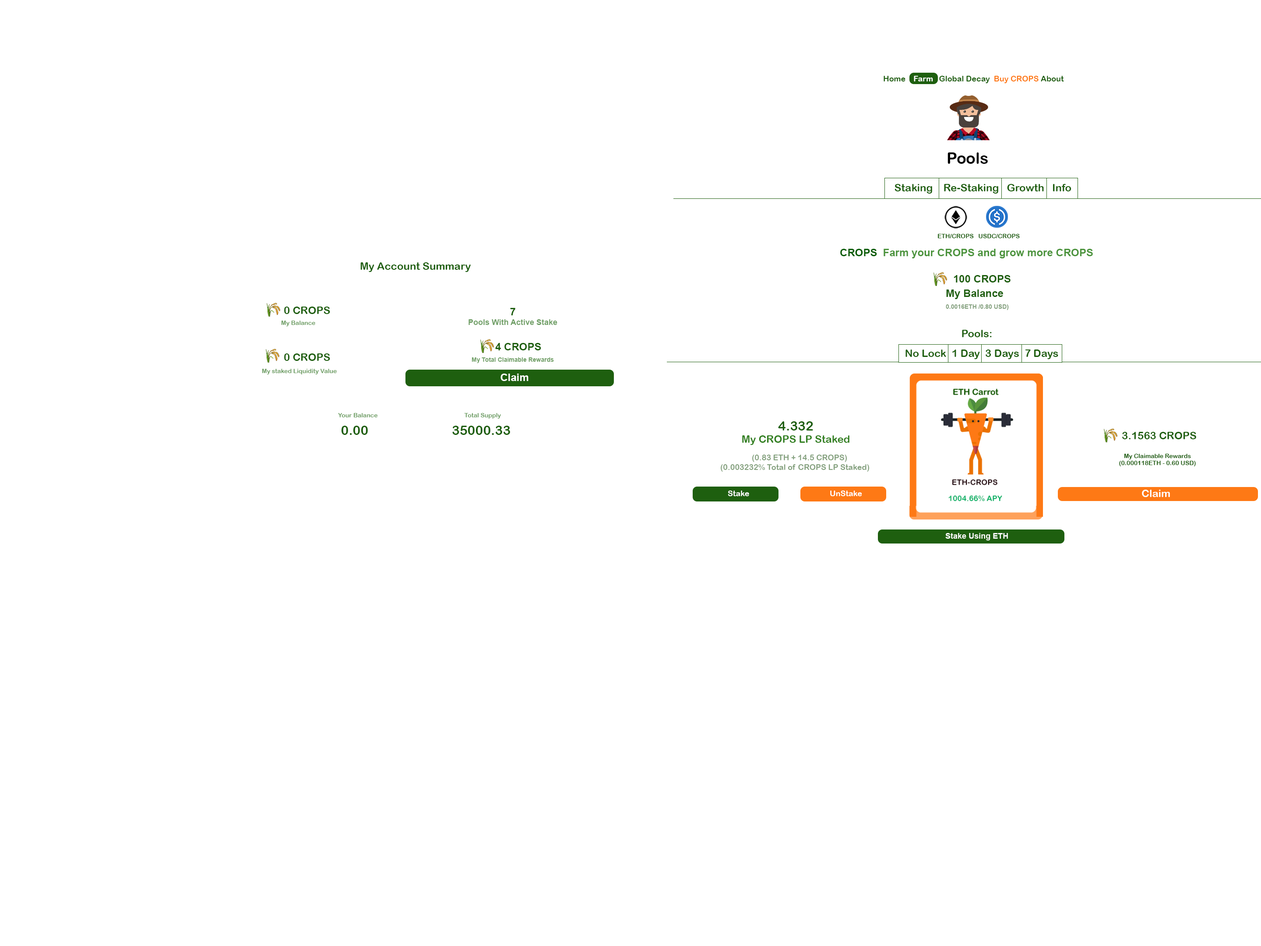
<style>
.page{position:relative;width:1261px;height:946px;background:#ffffff}
.page>*{position:absolute;margin:0}
.t1{font:7.9px "ArialRoundedMTBold";color:#1e5f0f}
.t2{font:7.9px "ArialRoundedMTBold";color:#ffffff}
.t3{font:7.9px "ArialRoundedMTBold";color:#fe7915}
.t4{font:15.8px "ArialRoundedMTBold";color:#000000}
.t5{font:10.5px "ArialRoundedMTBold";color:#1e5f0f}
.t6{font:6.1px "ArialRoundedMTBold";color:#1e5f0f}
.t7{font:10.5px "Arial-BoldMT";color:#4c943d}
.t8{font:10.5px "Arial-BoldMT";color:#065c00}
.t9{font:10.5px "Arial-BoldMT";color:#1e5f0f}
.t10{font:6.1px "Arial-BoldMT";color:#83a07d}
.t11{font:7.9px "Arial-BoldMT";color:#709f66}
.t12{font:6.1px "ArialRoundedMTBold";color:#709f66}
.t13{font:6.1px "Arial-BoldMT";color:#709f66}
.t14{font:10.5px "Arial-BoldMT";color:#ffffff}
.t15{font:13.1px "ArialRoundedMTBold";color:#1e5f0f}
.t16{font:10.5px "ArialRoundedMTBold";color:#328020}
.t17{font:7.9px "ArialRoundedMTBold";color:#83a07d}
.t18{font:10.5px "ArialRoundedMTBold";color:#ffffff}
.t19{font:7.9px "Arial-BoldMT";color:#ffffff}
</style>
<div class="page">
<p class="t1" style="left:884px;top:76px;width:180px;height:7px">Home   <span class="t2"> Farm  </span> Global Decay  <span class="t3">Buy CROPS</span> About</p>
<p class="t4" style="left:947px;top:152px;width:41px;height:12px">Pools</p>
<p class="t5" style="left:894px;top:184px;width:177px;height:10px">Staking    Re-Staking   Growth   Info</p>
<p class="t6" style="left:938px;top:234px;width:82px;height:4px">ETH/CROPS   USDC/CROPS</p>
<p class="t7" style="left:840px;top:249px;width:253px;height:9px"><span class="t8">CROPS  </span>Farm your CROPS and grow more CROPS</p>
<p class="t5" style="left:360px;top:262px;width:111px;height:10px">My Account Summary</p>
<p class="t9" style="left:954px;top:275px;width:56px;height:7px">100 CROPS</p>
<p class="t9" style="left:946px;top:289px;width:57px;height:10px">My Balance</p>
<p class="t10" style="left:946px;top:304px;width:63px;height:6px">0.0016ETH /0.80 USD)</p>
<p class="t5" style="left:284px;top:306px;width:46px;height:8px">0 CROPS</p>
<p class="t11" style="left:468px;top:308px;width:89px;height:17px;text-align:center"><span class="t9">7<br></span>Pools With Active Stake</p>
<p class="t12" style="left:281px;top:320px;width:34px;height:6px">My Balance</p>
<p class="t5" style="left:962px;top:330px;width:30px;height:7px">Pools:</p>
<p class="t5" style="left:284px;top:353px;width:46px;height:8px">0 CROPS</p>
<p class="t9" style="left:495px;top:343px;width:46px;height:7px">4 CROPS</p>
<p class="t5" style="left:905px;top:349px;width:153px;height:10px">No Lock  1 Day  3 Days  7 Days</p>
<p class="t13" style="left:472px;top:357px;width:82px;height:6px">My Total Claimable Rewards</p>
<p class="t12" style="left:262px;top:369px;width:75px;height:5px">My staked Liquidity Value</p>
<p class="t14" style="left:500px;top:373px;width:28px;height:8px">Claim</p>
<p class="t12" style="left:338px;top:413px;width:163px;height:6px">Your Balance       Total Supply</p>
<p class="t15" style="left:341px;top:426px;width:169px;height:9px">0.00          35000.33</p>
<p class="t16" style="left:742px;top:421px;width:107px;height:24px;text-align:center"><span class="t15">4.332<br></span>My CROPS LP Staked</p>
<p class="t5" style="left:1122px;top:432px;width:74px;height:7px">3.1563 CROPS</p>
<p class="t17" style="left:721px;top:454px;width:148px;height:18px"><span class="t1">  </span>(0.83 ETH + 14.5 CROPS)<br>(0.003232% Total of CROPS LP Staked)</p>
<p class="t6" style="left:1119px;top:454px;width:77px;height:12px;text-align:center">My Claimable Rewards<br>(0.000118ETH - 0.60 USD)</p>
<p class="t2" style="left:728px;top:490px;width:21px;height:6px">Stake</p>
<p class="t2" style="left:830px;top:490px;width:32px;height:6px">UnStake</p>
<p class="t18" style="left:1142px;top:489px;width:28px;height:8px">Claim</p>
<p class="t19" style="left:945px;top:533px;width:63px;height:7px">Stake Using ETH</p>
</div>
